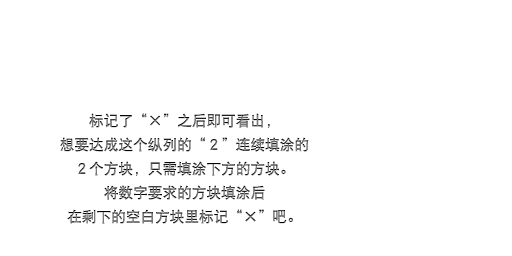
<style>
.page{position:relative;width:512px;height:256px;background:#ffffff}
.page>*{position:absolute;margin:0}
.t1{font:14.7px/24px "DFPHeiW5-GB"}
</style>
<div class="page">
<p class="t1" style="left:60px;top:113px;width:249px;height:111px;text-align:center">标记了“×”之后即可看出，<br>想要达成这个纵列的“２”连续填涂的<br>２个方块，只需填涂下方的方块。<br>将数字要求的方块填涂后<br>在剩下的空白方块里标记“×”吧。</p>
</div>
